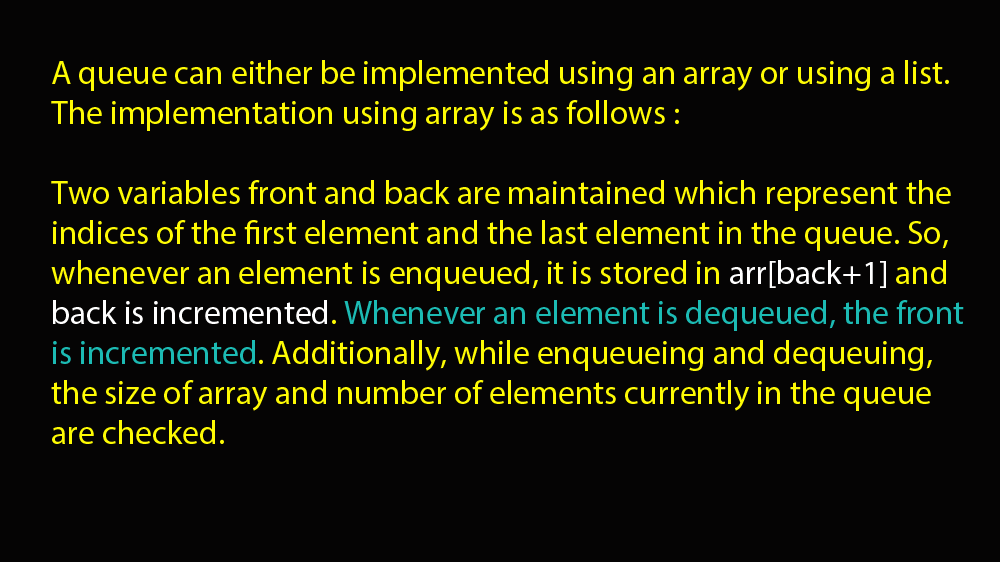
<style>
.page{position:relative;width:1000px;height:562px;background:#050404}
.page>*{position:absolute;margin:0}
.t1{font:33.3px "MyriadPro-Regular";color:#fefb04}
.t2{font:33.3px "MyriadPro-Regular";color:#ffffff}
.t3{font:33.3px "MyriadPro-Regular";color:#1cbbb4}
</style>
<div class="page">
<p class="t1" style="left:51px;top:60px;width:913px;height:384px">A queue can either be implemented using an array or using a list. The implementation using array is as follows :<br><br>Two variables front and back are maintained which represent the indices of the first element and the last element in the queue. So, whenever an element is enqueued, it is stored in <span class="t2">arr[back+1]</span> and <span class="t2">back is incremented</span>. <span class="t3">Whenever an element is dequeued, the front is incremented</span>. Additionally, while enqueueing and dequeuing, the size of array and number of elements currently in the queue are checked.</p>
</div>
